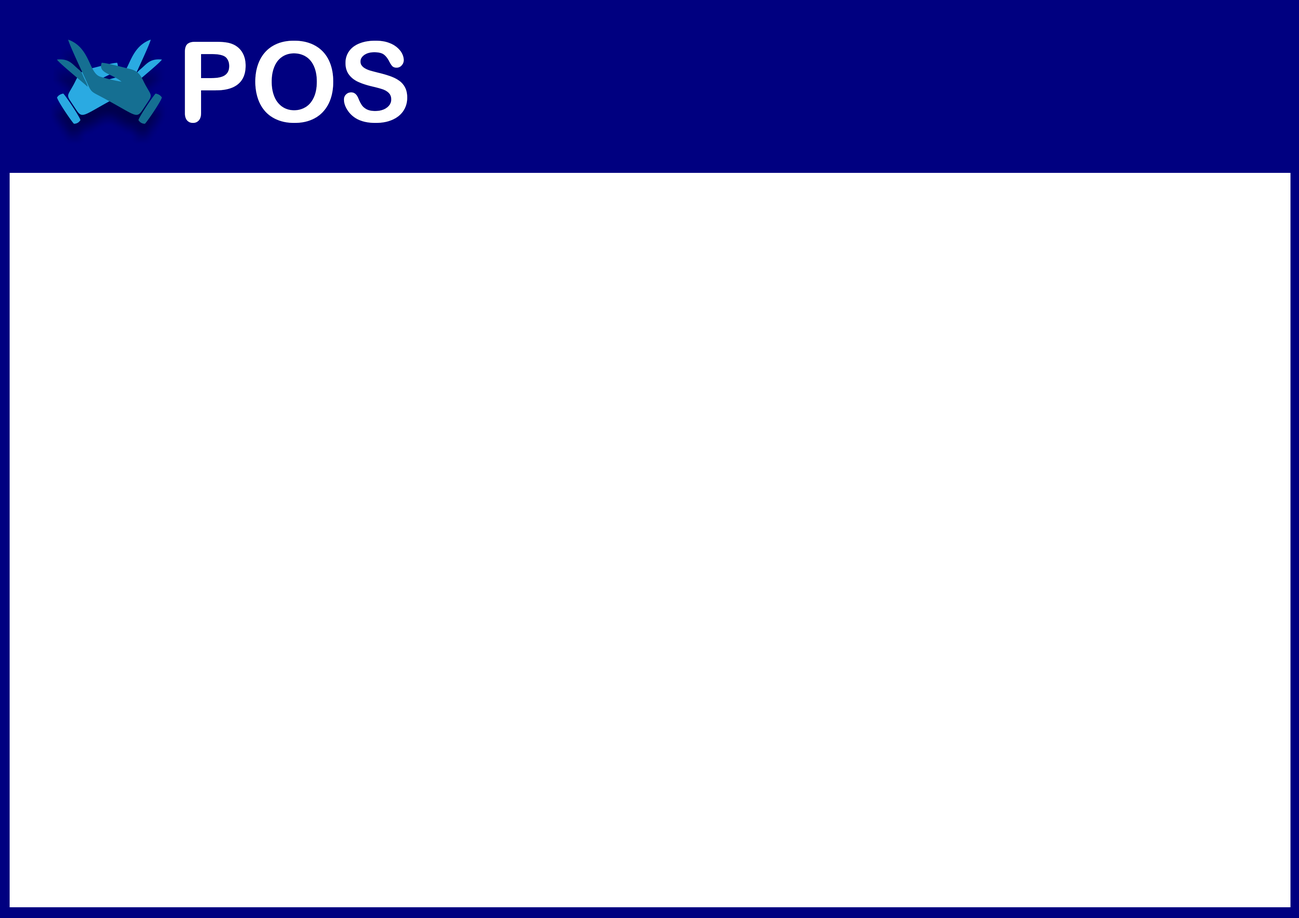
<style>
.page{position:relative;width:1299px;height:918px;background:#ffffff}
.page>*{position:absolute;margin:0}
.t1{font:111.1px "ArialRoundedMTBold";color:#ffffff}
</style>
<div class="page">
<p class="t1" style="left:185px;top:41px;width:222px;height:82px">POS</p>
</div>
